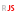
<style>
.page{position:relative;width:16px;height:16px;background:#ffffff}
.page>*{position:absolute;margin:0}
.t1{font:8px "MyriadPro-Regular";color:#c3c3c3}
.t2{font:8px "MyriadPro-Regular";color:#f11010}
</style>
<div class="page">
<p class="t1" style="left:2px;top:5px;width:5px;height:6px">R</p>
<p class="t2" style="left:7px;top:5px;width:8px;height:6px">JS</p>
</div>
